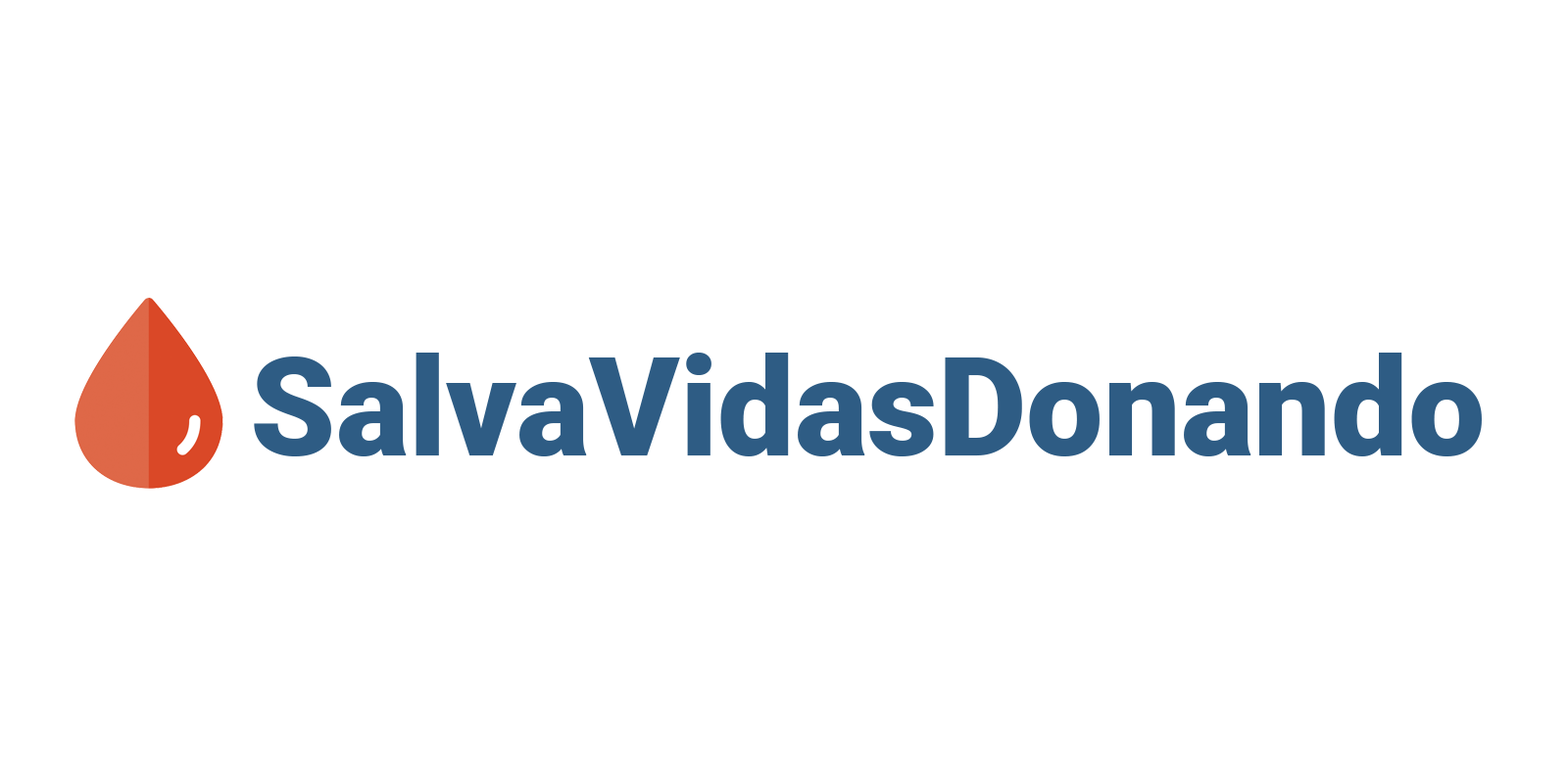
<style>
.page{position:relative;width:1568px;height:760px;background:#ffffff}
.page>*{position:absolute;margin:0}
.t1{font:137.2px "Roboto-Black";color:#2e5c84}
</style>
<div class="page">
<p class="t1" style="left:254px;top:353px;width:1228px;height:104px">SalvaVidasDonando</p>
</div>
